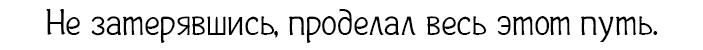
<style>
.page{position:relative;width:703px;height:50px;background:#ffffff}
.page>*{position:absolute;margin:0}
.t1{font:37px "Plainot";color:#000000}
</style>
<div class="page">
<p class="t1" style="left:46px;top:8px;width:612px;height:35px">Не затерявшись, проделал весь этот путь.</p>
</div>
